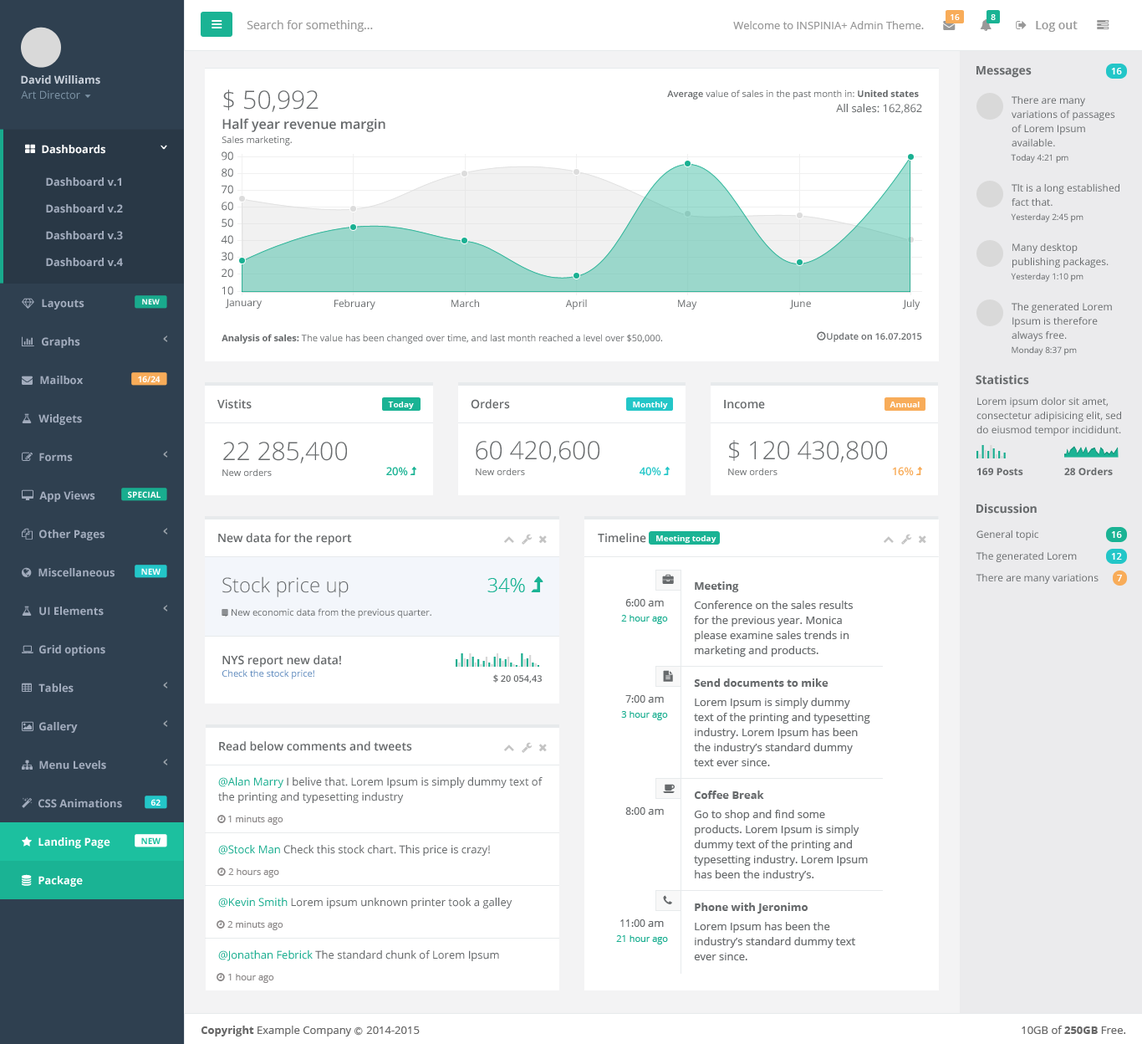
<style>
.page{position:relative;width:1142px;height:1044px;background:#ffffff}
.page>*{position:absolute;margin:0}
.t1{font:8.4px "OpenSans-Semibold";color:#ffffff}
.t2{font:11.7px "OpenSans";color:#999999}
.t3{font:10.9px "OpenSans";color:#999999}
.t4{font:11.7px "OpenSans-Semibold";color:#999999}
.t5{font:10.9px "OpenSans-Bold";color:#cad1db}
.t6{font:11.7px "OpenSans-Bold";color:#676a6c}
.t7{font:9.2px "OpenSans-Semibold";color:#ffffff}
.t8{font:25.1px "OpenSans-Light";color:#676a6c}
.t9{font:9.2px "OpenSans";color:#676a6c}
.t10{font:9.2px "OpenSans-Semibold";color:#676a6c}
.t11{font:9.2px "OpenSans-Bold";color:#676a6c}
.t12{font:10.9px "OpenSans";color:#7d93a5}
.t13{font:10px/14.2px "OpenSans";color:#676a6c}
.t14{font:10.9px "OpenSans";color:#676a6c}
.t15{font:13.4px "OpenSans-Semibold";color:#676a6c}
.t16{font:10.9px "OpenSans-Bold";color:#fefefe}
.t17{font:8.4px "OpenSans";color:#676a6c}
.t18{font:10.9px "OpenSans-Bold";color:#a2acbd}
.t19{font:7.5px "OpenSans-Bold";color:#fefefe}
.t20{font:10px "OpenSans";color:#676a6c}
.t21{font:8.4px "OpenSans-Bold";color:#fefefe}
.t22{font:11.7px "OpenSans-Semibold";color:#676a6c}
.t23{font:10.9px "OpenSans-Semibold";color:#1ab394}
.t24{font:10.9px "OpenSans-Semibold";color:#23c6c8}
.t25{font:10.9px "OpenSans-Semibold";color:#f8ac59}
.t26{font:10px "OpenSans-Bold";color:#676a6c}
.t27{font:20.1px "OpenSans-Light";color:#676a6c}
.t28{font:20.1px "OpenSans-Light";color:#1ab394}
.t29{font:10.9px "OpenSans-Bold";color:#676a6c}
.t30{font:10.9px/15.1px "OpenSans";color:#676a6c}
.t31{font:9.2px "OpenSans";color:#19ae90}
.t32{font:9.2px "OpenSans";color:#5986bb}
.t33{font:10.9px/15.1px "OpenSans";color:#19ad8f}
.t34{font:9.2px "OpenSans";color:#8b8888}
.t35{font:10.9px "OpenSans-Bold";color:#ffffff}
.t36{font:8.4px "OpenSans-Bold";color:#1cc09f}
.t37{font:10.9px "OpenSans";color:#19ad8f}
.t38{font:10.9px "OpenSans";color:#666666}
.t39{font:10.9px "OpenSans-Bold";color:#666666}
.t40{font:8.4px "Meiryo";color:#666666}
</style>
<div class="page">
<p class="t1" style="left:951px;top:14px;width:9px;height:6px">16</p>
<p class="t1" style="left:991px;top:14px;width:5px;height:6px">8</p>
<p class="t2" style="left:247px;top:20px;width:126px;height:12px">Search for something...</p>
<p class="t3" style="left:733px;top:21px;width:191px;height:8px">Welcome to INSPINIA+ Admin Theme.</p>
<p class="t4" style="left:1036px;top:21px;width:42px;height:11px">Log out</p>
<p class="t5" style="left:21px;top:75px;width:79px;height:9px">David Williams</p>
<p class="t6" style="left:977px;top:66px;width:55px;height:12px">Messages</p>
<p class="t7" style="left:1111px;top:68px;width:11px;height:6px">16</p>
<p class="t8" style="left:223px;top:89px;width:96px;height:23px">$ 50,992</p>
<p class="t9" style="left:667px;top:89px;width:252px;height:11px"><span class="t10">Average</span> value of sales in the past month in: <span class="t11">United states</span></p>
<p class="t12" style="left:21px;top:90px;width:59px;height:10px">Art Director</p>
<p class="t13" style="left:1012px;top:96px;width:104px;height:50px">There are many<br>variations of passages<br>of Lorem Ipsum<br>available.</p>
<p class="t14" style="left:836px;top:104px;width:86px;height:10px">All sales: 162,862</p>
<p class="t15" style="left:222px;top:118px;width:164px;height:14px">Half year revenue margin</p>
<p class="t9" style="left:222px;top:135px;width:70px;height:11px">Sales marketing.</p>
<p class="t16" style="left:42px;top:145px;width:63px;height:9px">Dashboards</p>
<p class="t14" style="left:222px;top:151px;width:11px;height:10px">90</p>
<p class="t17" style="left:1011px;top:154px;width:58px;height:9px">Today 4:21 pm</p>
<p class="t14" style="left:222px;top:168px;width:11px;height:9px">80</p>
<p class="t18" style="left:46px;top:177px;width:75px;height:10px">Dashboard v.1</p>
<p class="t14" style="left:222px;top:185px;width:11px;height:9px">70</p>
<p class="t13" style="left:1012px;top:184px;width:108px;height:22px">Tlt is a long established<br>fact that.</p>
<p class="t18" style="left:46px;top:204px;width:77px;height:9px">Dashboard v.2</p>
<p class="t14" style="left:222px;top:202px;width:11px;height:9px">60</p>
<p class="t14" style="left:222px;top:218px;width:11px;height:9px">50</p>
<p class="t17" style="left:1011px;top:213px;width:73px;height:9px">Yesterday 2:45 pm</p>
<p class="t18" style="left:46px;top:231px;width:77px;height:9px">Dashboard v.3</p>
<p class="t14" style="left:221px;top:235px;width:12px;height:9px">40</p>
<p class="t13" style="left:1013px;top:243px;width:96px;height:25px">Many desktop<br>publishing packages.</p>
<p class="t18" style="left:46px;top:258px;width:77px;height:9px">Dashboard v.4</p>
<p class="t14" style="left:222px;top:252px;width:11px;height:9px">30</p>
<p class="t14" style="left:222px;top:268px;width:11px;height:10px">20</p>
<p class="t17" style="left:1011px;top:273px;width:73px;height:9px">Yesterday 1:10 pm</p>
<p class="t14" style="left:222px;top:286px;width:11px;height:9px">10</p>
<p class="t18" style="left:42px;top:299px;width:42px;height:10px">Layouts</p>
<p class="t19" style="left:142px;top:299px;width:18px;height:5px">NEW</p>
<p class="t20" style="left:225px;top:299px;width:37px;height:10px">January</p>
<p class="t20" style="left:335px;top:299px;width:41px;height:10px">February</p>
<p class="t20" style="left:452px;top:299px;width:27px;height:8px">March</p>
<p class="t20" style="left:565px;top:299px;width:22px;height:10px">April</p>
<p class="t20" style="left:678px;top:299px;width:20px;height:10px">May</p>
<p class="t20" style="left:790px;top:299px;width:21px;height:10px">June</p>
<p class="t20" style="left:902px;top:299px;width:19px;height:10px">July</p>
<p class="t13" style="left:1012px;top:303px;width:100px;height:38px">The generated Lorem<br>Ipsum is therefore<br>always free.</p>
<p class="t18" style="left:42px;top:337px;width:38px;height:11px">Graphs</p>
<p class="t9" style="left:222px;top:334px;width:440px;height:10px"><span class="t11">Analysis of sales:</span> The value has been changed over time, and last month reached a level over $50,000.</p>
<p class="t10" style="left:827px;top:332px;width:95px;height:10px">Update on 16.07.2015</p>
<p class="t17" style="left:1012px;top:346px;width:65px;height:9px">Monday 8:37 pm</p>
<p class="t18" style="left:40px;top:376px;width:43px;height:9px">Mailbox</p>
<p class="t21" style="left:138px;top:376px;width:23px;height:6px">16/24</p>
<p class="t6" style="left:976px;top:375px;width:54px;height:10px">Statistics</p>
<p class="t22" style="left:217px;top:399px;width:35px;height:10px">Vistits</p>
<p class="t21" style="left:388px;top:401px;width:26px;height:8px">Today</p>
<p class="t22" style="left:471px;top:399px;width:39px;height:10px">Orders</p>
<p class="t21" style="left:633px;top:401px;width:35px;height:8px">Monthly</p>
<p class="t22" style="left:724px;top:400px;width:41px;height:9px">Income</p>
<p class="t21" style="left:890px;top:401px;width:30px;height:6px">Annual</p>
<p class="t13" style="left:977px;top:397px;width:145px;height:39px">Lorem ipsum dolor sit amet,<br>consectetur adipisicing elit, sed<br>do eiusmod tempor incididunt.</p>
<p class="t18" style="left:38px;top:414px;width:44px;height:11px">Widgets</p>
<p class="t8" style="left:223px;top:442px;width:124px;height:21px">22 285,400</p>
<p class="t8" style="left:476px;top:441px;width:124px;height:21px">60 420,600</p>
<p class="t8" style="left:729px;top:440px;width:158px;height:22px">$ 120 430,800</p>
<p class="t18" style="left:39px;top:452px;width:34px;height:10px">Forms</p>
<p class="t9" style="left:222px;top:468px;width:50px;height:8px">New orders</p>
<p class="t23" style="left:386px;top:467px;width:22px;height:9px">20%</p>
<p class="t9" style="left:476px;top:468px;width:49px;height:7px">New orders</p>
<p class="t24" style="left:640px;top:467px;width:22px;height:9px">40%</p>
<p class="t9" style="left:728px;top:468px;width:50px;height:7px">New orders</p>
<p class="t25" style="left:892px;top:467px;width:22px;height:9px">16%</p>
<p class="t26" style="left:977px;top:468px;width:47px;height:7px">169 Posts</p>
<p class="t26" style="left:1065px;top:468px;width:48px;height:7px">28 Orders</p>
<p class="t18" style="left:39px;top:491px;width:56px;height:11px">App Views</p>
<p class="t21" style="left:128px;top:491px;width:33px;height:7px">SPECIAL</p>
<p class="t6" style="left:977px;top:503px;width:60px;height:11px">Discussion</p>
<p class="t18" style="left:39px;top:529px;width:66px;height:11px">Other Pages</p>
<p class="t22" style="left:218px;top:533px;width:134px;height:12px">New data for the report</p>
<p class="t22" style="left:598px;top:533px;width:48px;height:10px">Timeline</p>
<p class="t20" style="left:977px;top:530px;width:62px;height:10px">General topic</p>
<p class="t7" style="left:1111px;top:531px;width:11px;height:7px">16</p>
<p class="t21" style="left:657px;top:535px;width:60px;height:8px">Meeting today</p>
<p class="t20" style="left:976px;top:552px;width:101px;height:10px">The generated Lorem</p>
<p class="t7" style="left:1111px;top:553px;width:11px;height:7px">12</p>
<p class="t18" style="left:38px;top:568px;width:77px;height:9px">Miscellaneous</p>
<p class="t21" style="left:141px;top:568px;width:20px;height:7px">NEW</p>
<p class="t27" style="left:222px;top:576px;width:127px;height:21px">Stock price up</p>
<p class="t28" style="left:488px;top:578px;width:37px;height:14px">34%</p>
<p class="t29" style="left:695px;top:581px;width:44px;height:11px">Meeting</p>
<p class="t20" style="left:976px;top:574px;width:123px;height:10px">There are many variations</p>
<p class="t7" style="left:1117px;top:575px;width:5px;height:6px">7</p>
<p class="t20" style="left:626px;top:599px;width:38px;height:7px">6:00 <span class="t14">am</span></p>
<p class="t30" style="left:694px;top:600px;width:159px;height:57px">Conference on the sales results for the previous year. Monica please examine sales trends in marketing and products.</p>
<p class="t18" style="left:39px;top:606px;width:65px;height:10px">UI Elements</p>
<p class="t9" style="left:232px;top:608px;width:200px;height:10px">New economic data from the previous quarter.</p>
<p class="t31" style="left:621px;top:615px;width:47px;height:9px">2 hour ago</p>
<p class="t18" style="left:39px;top:645px;width:66px;height:11px">Grid options</p>
<p class="t22" style="left:222px;top:655px;width:119px;height:12px">NYS report new data!</p>
<p class="t32" style="left:222px;top:669px;width:92px;height:10px">Check the stock price!</p>
<p class="t10" style="left:493px;top:674px;width:49px;height:9px">$ 20 054,43</p>
<p class="t18" style="left:38px;top:683px;width:36px;height:9px">Tables</p>
<p class="t29" style="left:694px;top:678px;width:135px;height:9px">Send documents to mike</p>
<p class="t20" style="left:626px;top:695px;width:38px;height:8px">7:00 <span class="t14">am</span></p>
<p class="t30" style="left:694px;top:698px;width:177px;height:68px">Lorem Ipsum is simply dummy<br>text of the printing and typesetting<br>industry. Lorem Ipsum has been<br>the industry’s standard dummy<br>text ever since.</p>
<p class="t31" style="left:621px;top:711px;width:47px;height:9px">3 hour ago</p>
<p class="t18" style="left:39px;top:722px;width:39px;height:11px">Gallery</p>
<p class="t22" style="left:219px;top:741px;width:193px;height:10px">Read below comments and tweets</p>
<p class="t18" style="left:39px;top:760px;width:67px;height:9px">Menu Levels</p>
<p class="t30" style="left:218px;top:777px;width:325px;height:26px"><span class="t33">@Alan Marry</span> I belive that. Lorem Ipsum is simply dummy text of the printing and typesetting industry</p>
<p class="t29" style="left:694px;top:790px;width:70px;height:9px">Coffee Break</p>
<p class="t18" style="left:38px;top:799px;width:84px;height:9px">CSS Animations</p>
<p class="t21" style="left:151px;top:799px;width:10px;height:6px">62</p>
<p class="t20" style="left:626px;top:807px;width:38px;height:8px">8:00 <span class="t14">am</span></p>
<p class="t30" style="left:694px;top:810px;width:174px;height:71px">Go to shop and find some products. Lorem Ipsum is simply dummy text of the printing and typesetting industry. Lorem Ipsum has been the industry’s.</p>
<p class="t34" style="left:228px;top:815px;width:56px;height:10px">1 minuts ago</p>
<p class="t35" style="left:38px;top:837px;width:72px;height:11px">Landing Page</p>
<p class="t36" style="left:141px;top:837px;width:20px;height:7px">NEW</p>
<p class="t14" style="left:218px;top:845px;width:272px;height:11px"><span class="t37">@Stock Man</span> Check this stock chart. This price is crazy!</p>
<p class="t34" style="left:228px;top:868px;width:51px;height:9px">2 hours ago</p>
<p class="t35" style="left:38px;top:876px;width:45px;height:11px">Package</p>
<p class="t14" style="left:218px;top:897px;width:295px;height:11px"><span class="t37">@Kevin Smith</span> Lorem ipsum unknown printer took a galley</p>
<p class="t29" style="left:695px;top:902px;width:114px;height:11px">Phone with Jeronimo</p>
<p class="t34" style="left:227px;top:921px;width:57px;height:9px">2 minuts ago</p>
<p class="t20" style="left:621px;top:919px;width:43px;height:8px">11:00 <span class="t14">am</span></p>
<p class="t30" style="left:694px;top:922px;width:162px;height:38px">Lorem Ipsum has been the industry’s standard dummy text ever since.</p>
<p class="t31" style="left:616px;top:935px;width:52px;height:9px">21 hour ago</p>
<p class="t14" style="left:218px;top:950px;width:281px;height:11px"><span class="t37">@Jonathan Febrick</span> The standard chunk of Lorem Ipsum</p>
<p class="t34" style="left:228px;top:974px;width:46px;height:9px">1 hour ago</p>
<p class="t38" style="left:201px;top:1025px;width:219px;height:11px"><span class="t39">Copyright</span> Example Company <span class="t40">Ⓒ </span>2014-2015</p>
<p class="t38" style="left:1022px;top:1025px;width:105px;height:9px">10GB of <span class="t39">250GB</span> Free.</p>
</div>
